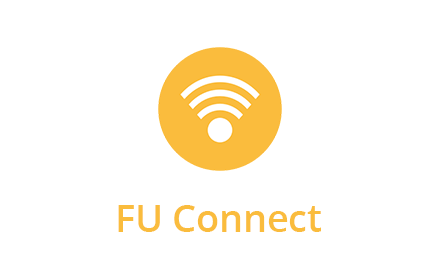
<style>
.page{position:relative;width:440px;height:280px;background:#ffffff}
.page>*{position:absolute;margin:0}
.t1{font:37.5px "OpenSans-Semibold";color:#fabc3d}
</style>
<div class="page">
<p class="t1" style="left:118px;top:205px;width:203px;height:27px">FU Connect</p>
</div>
